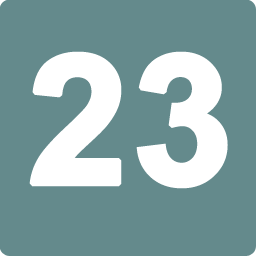
<style>
.page{position:relative;width:256px;height:256px;background:#648a8c}
.page>*{position:absolute;margin:0}
.t1{font:180px "Arial-BoldMT";color:#ffffff;font-weight:bold}
</style>
<div class="page">
<p class="t1" style="left:29px;top:51px;width:199px;height:138px">23</p>
</div>
